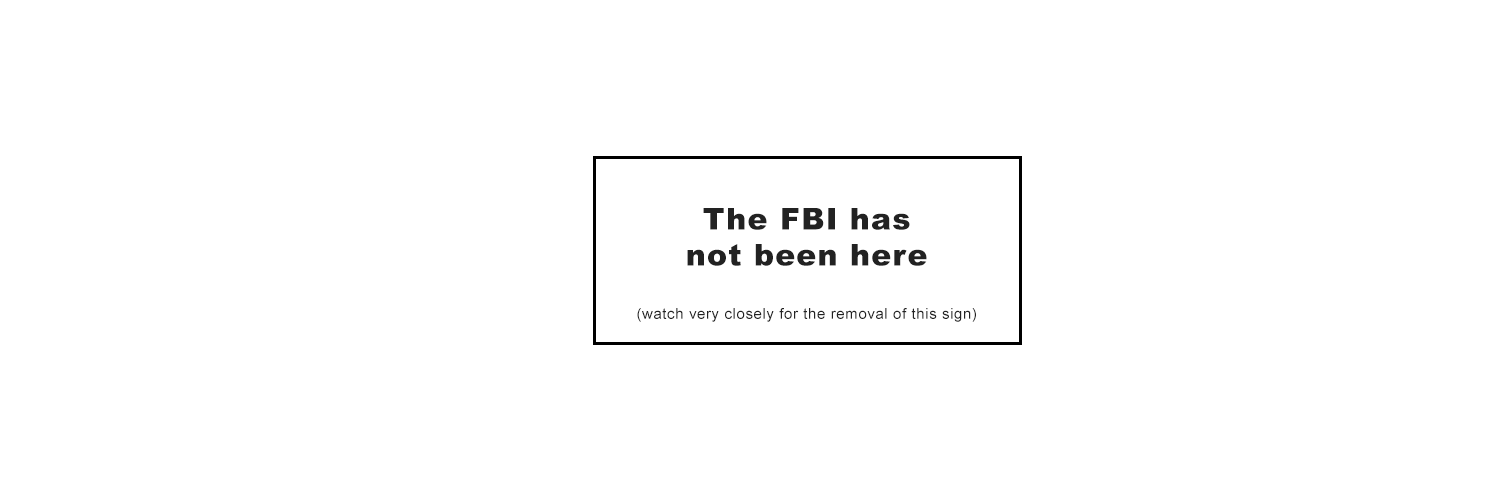
<style>
.page{position:relative;width:1500px;height:500px;background:#ffffff}
.page>*{position:absolute;margin:0}
.t1{font:30px "Arial-Black";letter-spacing:0.04em;color:#222222}
.t2{font:15px "ArialMT";letter-spacing:0.04em;color:#222222}
</style>
<div class="page">
<p class="t1" style="left:687px;top:208px;width:240px;height:58px;text-align:center">The FBI has<br>not been here</p>
<p class="t2" style="left:637px;top:308px;width:339px;height:14px">(watch very closely for the removal of this sign)</p>
</div>
